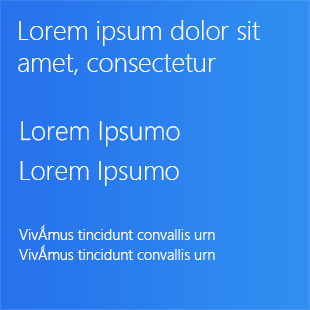
<style>
.page{position:relative;width:310px;height:310px}
.page>*{position:absolute;margin:0}
.t1{font:26.7px/32px "SegoeUI-Light";color:#ffffff}
.t2{font:26.7px "SegoeUI-Light";color:#ffffff}
.t3{font:14.7px "SegoeUI-Semilight";color:#ffffff}
</style>
<div class="page">
<p class="t1" style="left:18px;top:20px;width:242px;height:55px">Lorem ipsum dolor sit <br>amet, consectetur</p>
<p class="t2" style="left:21px;top:121px;width:159px;height:26px">Lorem Ipsumo</p>
<p class="t2" style="left:20px;top:161px;width:159px;height:25px">Lorem Ipsumo</p>
<p class="t3" style="left:19px;top:225px;width:196px;height:15px">VivǺmus tincidunt convallis urn</p>
<p class="t3" style="left:19px;top:245px;width:196px;height:15px">VivǺmus tincidunt convallis urn</p>
</div>
